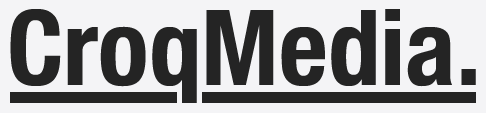
<style>
.page{position:relative;width:486px;height:113px;background:#f4f4f6}
.page>*{position:absolute;margin:0}
.t1{font:105px "HelveticaNeue-CondensedBold";color:#242424}
</style>
<div class="page">
<p class="t1" style="left:10px;top:9px;width:466px;height:94px">CroqMedia.</p>
</div>
